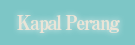
<style>
.page{position:relative;width:135px;height:45px;background:#7dc6c6}
.page>*{position:absolute;margin:0}
.t1{font:20px "RyuminPro-ExBold";letter-spacing:-0.08em;color:#f1e6d8;scale:0.9 1}
</style>
<div class="page">
<p class="t1" style="left:17px;top:15px;width:103px;height:18px">Kapal Perang</p>
</div>
